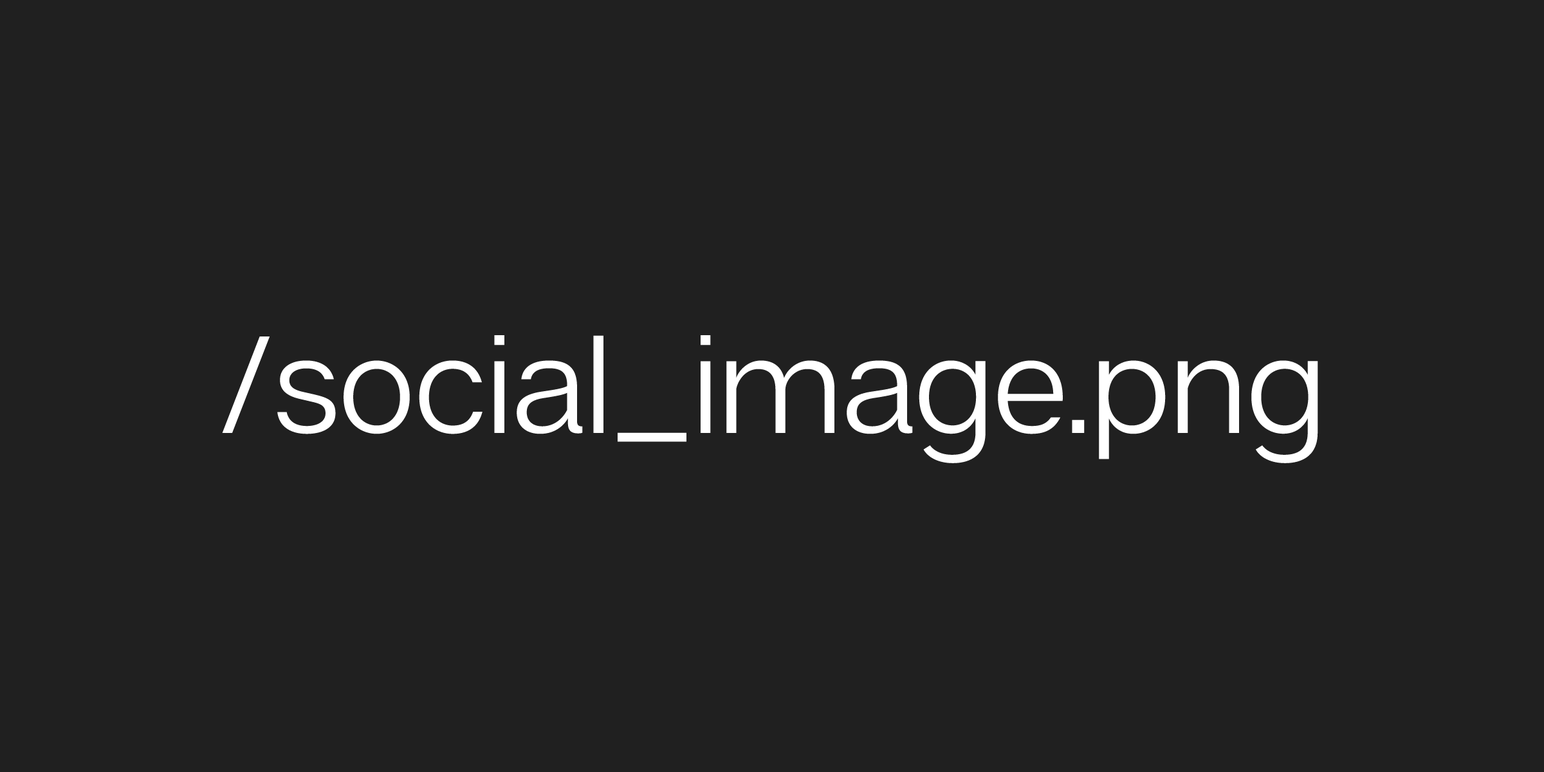
<style>
.page{position:relative;width:1544px;height:772px;background:#202020}
.page>*{position:absolute;margin:0}
.t1{font:137.7px "ArticulatCF-Normal";color:#ffffff}
</style>
<div class="page">
<p class="t1" style="left:222px;top:335px;width:1096px;height:128px">/social_image.png</p>
</div>
